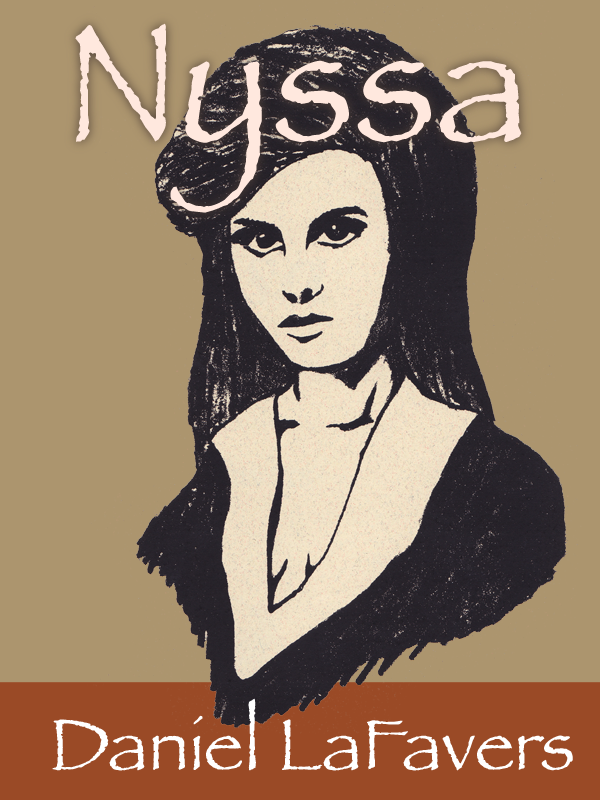
<style>
.page{position:relative;width:600px;height:800px;background:#ac956e}
.page>*{position:absolute;margin:0}
.t1{font:174.3px "Papyrus";color:#ffe8de}
.t2{font:74.7px "Papyrus";color:#ffffff}
</style>
<div class="page">
<p class="t1" style="left:75px;top:23px;width:447px;height:190px">Nyssa</p>
<p class="t2" style="left:52px;top:698px;width:521px;height:73px">Daniel LaFavers</p>
</div>
